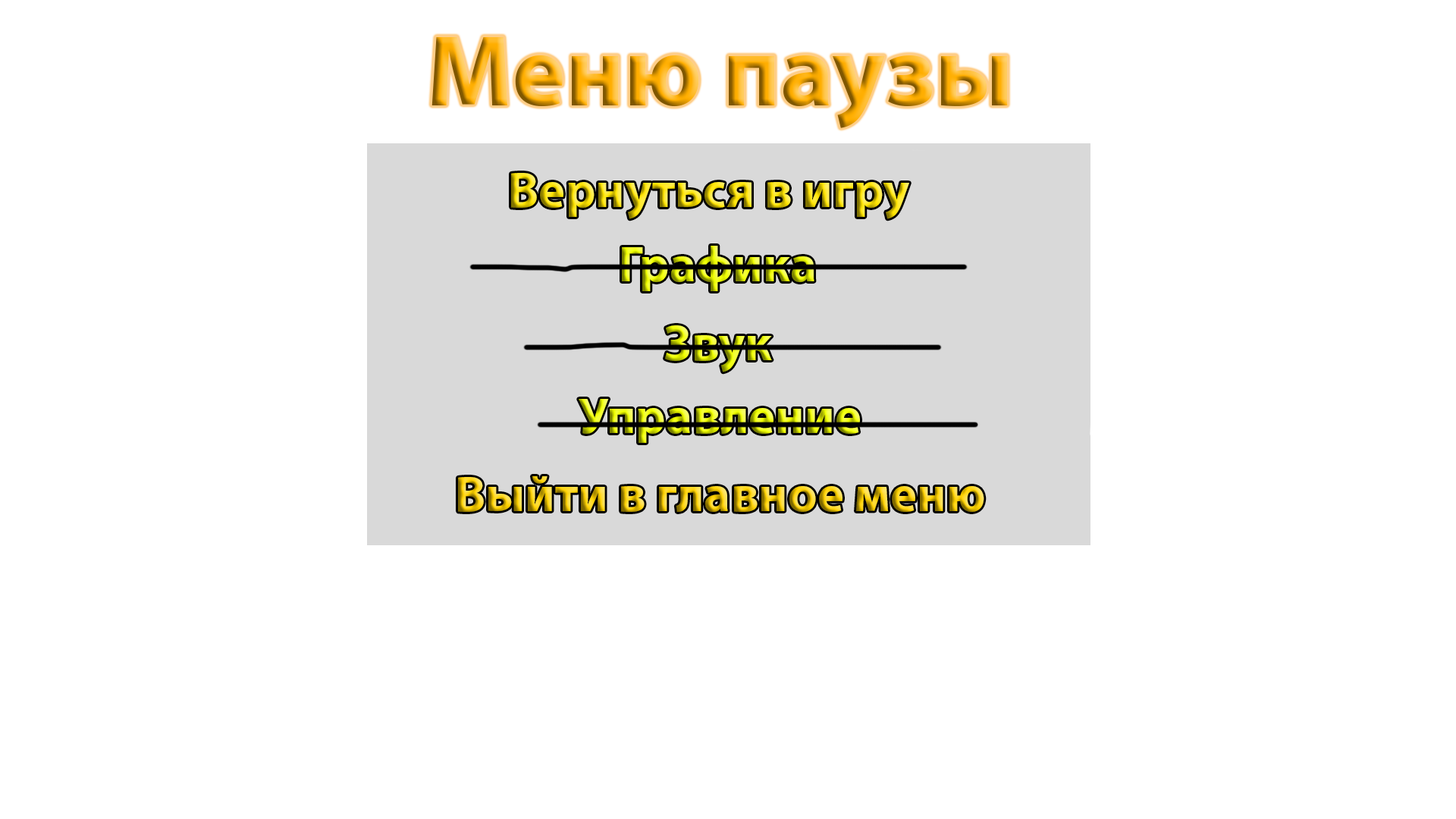
<style>
.page{position:relative;width:1456px;height:819px;background:#ffffff}
.page>*{position:absolute;margin:0}
.t1{font:101.1px "MyriadPro-Bold"}
.t2{font:50.6px "MyriadPro-Bold"}
</style>
<div class="page">
<p class="t1" style="left:431px;top:37px;width:577px;height:91px">Меню паузы</p>
<p class="t2" style="left:511px;top:173px;width:398px;height:46px">Вернуться в игру</p>
<p class="t2" style="left:622px;top:246px;width:192px;height:45px">Графика</p>
<p class="t2" style="left:665px;top:325px;width:107px;height:47px">Звук</p>
<p class="t2" style="left:579px;top:399px;width:281px;height:44px">Управление</p>
<p class="t2" style="left:458px;top:476px;width:526px;height:36px">Выйти в главное меню</p>
</div>
